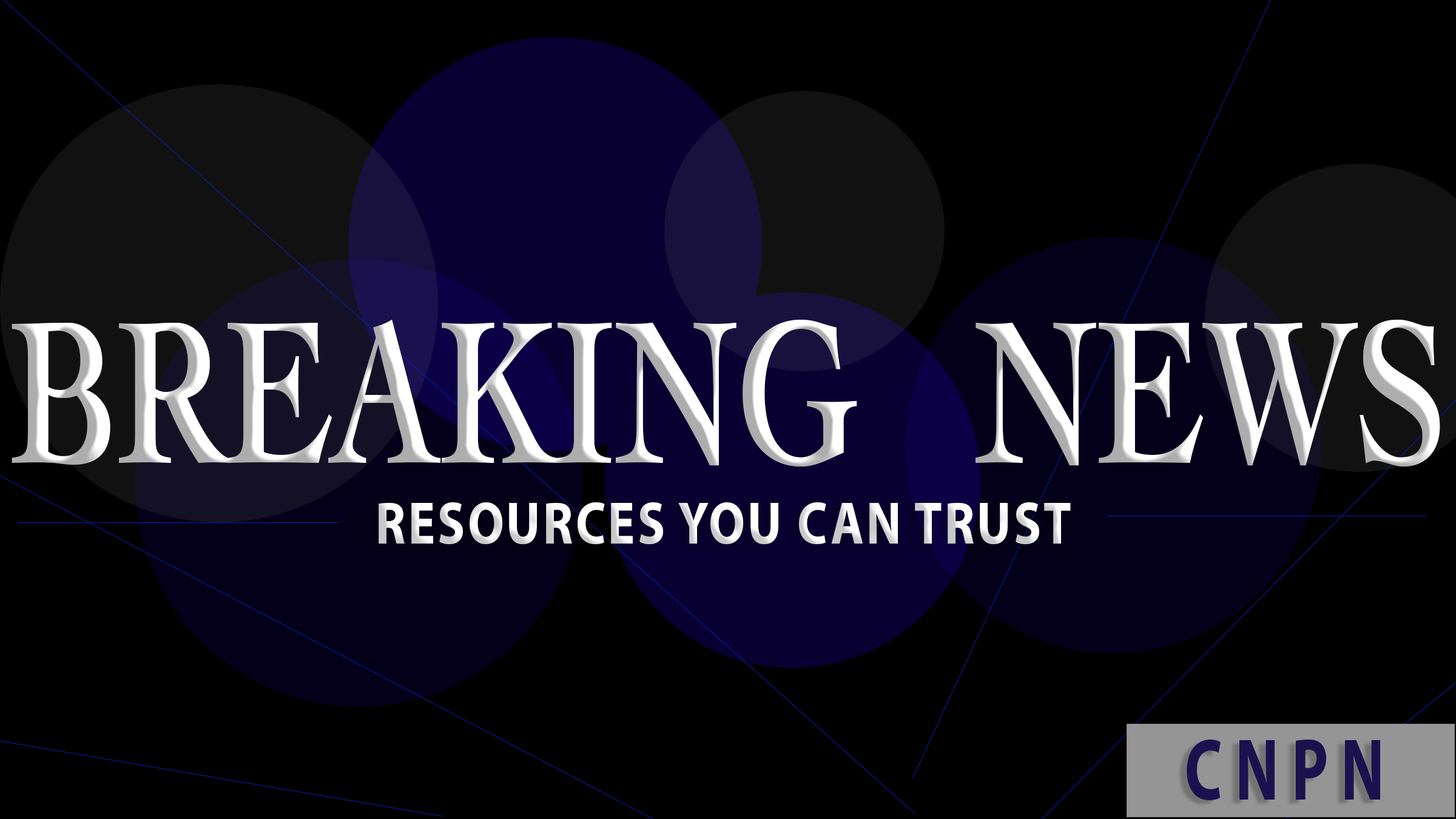
<style>
.page{position:relative;width:1456px;height:819px;background:#000000}
.page>*{position:absolute;margin:0}
.t1{font:212.3px "Cochin-Bold";scale:0.71 1}
.t2{font:60.7px "MyriadPro-Bold";letter-spacing:0.05em;color:#ffffff;scale:0.83 1}
.t3{font:88.5px "MyriadPro-Bold";letter-spacing:0.2em;color:#1b114f;scale:0.71 1}
</style>
<div class="page">
<p class="t1" style="left:12px;top:320px;width:1428px;height:147px">BREAKING   NEWS</p>
<p class="t2" style="left:379px;top:502px;width:692px;height:42px">RESOURCES YOU CAN TRUST</p>
<p class="t3" style="left:1187px;top:740px;width:193px;height:60px">CNPN</p>
</div>
